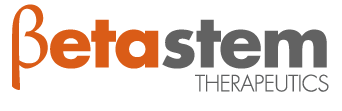
<style>
.page{position:relative;width:342px;height:111px;background:#ffffff}
.page>*{position:absolute;margin:0}
.t1{font:71px "FuturaKoyu";letter-spacing:-0.025em;color:#626262}
.t2{font:88px "MinionPro-Regular";letter-spacing:-0.025em;color:#da5c17}
.t3{font:71px "FuturaKoyu";letter-spacing:-0.025em;color:#da5c17}
.t4{font:22px "FuturaLight";letter-spacing:-0.025em;color:#5e5f60}
.t5{font:28px "FuturaLight";letter-spacing:-0.025em;color:#5e5f60}
</style>
<div class="page">
<p class="t1" style="left:12px;top:4px;width:315px;height:86px"><span class="t2">β</span><span class="t3">eta</span>stem</p>
<p class="t4" style="left:195px;top:74px;width:134px;height:18px"><span class="t5">                         </span>THERAPEUTICS</p>
</div>
